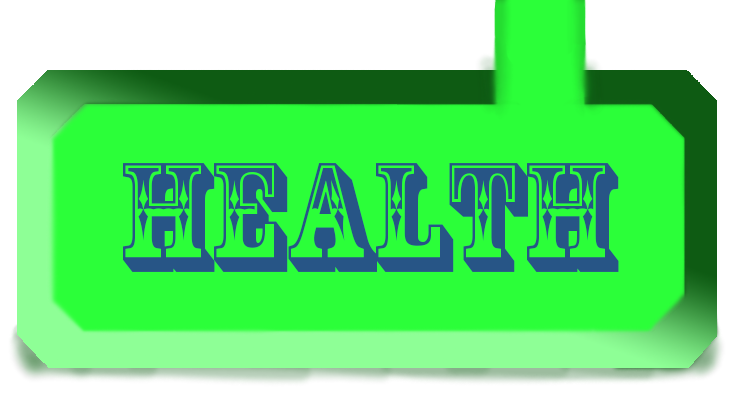
<style>
.page{position:relative;width:735px;height:403px;background:#2bff39}
.page>*{position:absolute;margin:0}
.t1{font:145.8px "RosewoodStd-Regular";color:#275586}
</style>
<div class="page">
<p class="t1" style="left:123px;top:163px;width:496px;height:109px">Health</p>
</div>
